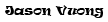
<style>
.page{position:relative;width:108px;height:22px;background:#ffffff}
.page>*{position:absolute;margin:0}
.t1{font:12px "Ravie";color:#000000}
</style>
<div class="page">
<p class="t1" style="left:5px;top:5px;width:99px;height:13px">Jason Vuong</p>
</div>
